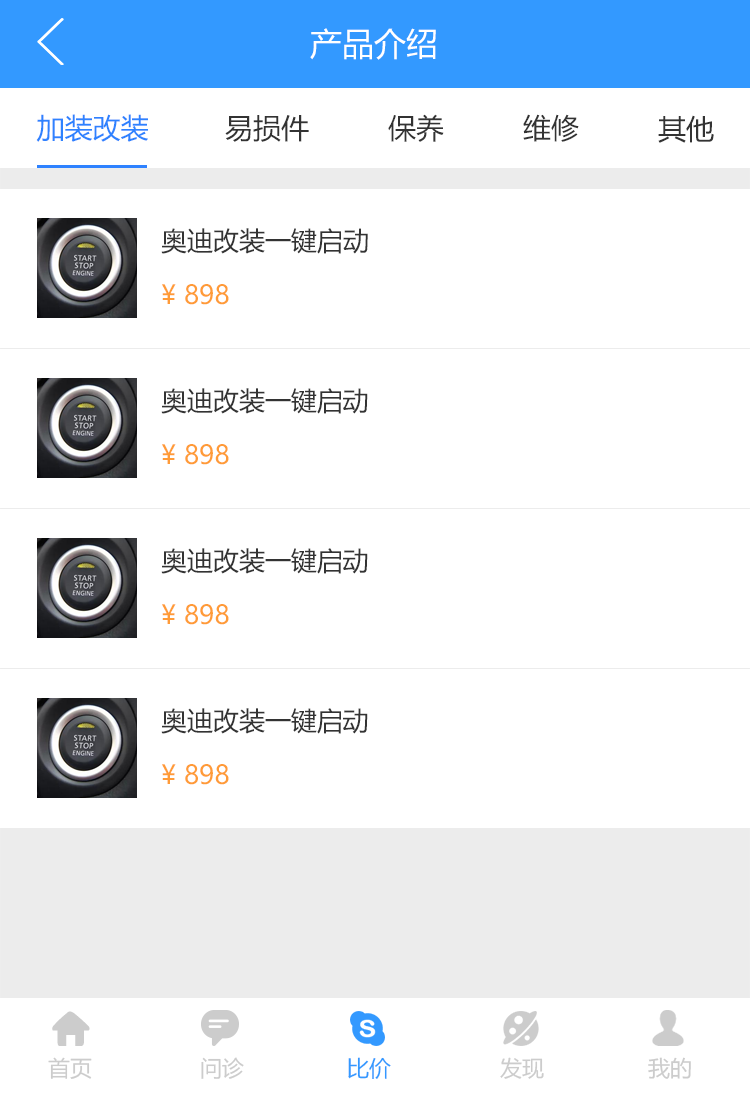
<style>
.page{position:relative;width:750px;height:1096px;background:#ffffff}
.page>*{position:absolute;margin:0}
.t1{font:32px "MicrosoftYaHei";color:#ffffff}
.t2{font:28px "MicrosoftYaHei";color:#2e82ff}
.t3{font:28px "MicrosoftYaHei";color:#333333}
.t4{font:26px "MicrosoftYaHei";color:#333333}
.t5{font:26px "MicrosoftYaHei";color:#ff9b37}
.t6{font:22px "MicrosoftYaHei";color:#cccccc}
.t7{font:22px "MicrosoftYaHei";color:#3399ff}
</style>
<div class="page">
<p class="t1" style="left:310px;top:28px;width:126px;height:32px">产品介绍</p>
<p class="t2" style="left:36px;top:114px;width:112px;height:28px">加装改装</p>
<p class="t3" style="left:225px;top:115px;width:84px;height:27px">易损件</p>
<p class="t3" style="left:388px;top:114px;width:56px;height:28px">保养</p>
<p class="t3" style="left:523px;top:114px;width:56px;height:28px">维修</p>
<p class="t3" style="left:658px;top:115px;width:56px;height:28px">其他</p>
<p class="t4" style="left:161px;top:228px;width:207px;height:26px">奥迪改装一键启动</p>
<p class="t5" style="left:162px;top:284px;width:67px;height:21px">¥ 898</p>
<p class="t4" style="left:161px;top:388px;width:207px;height:26px">奥迪改装一键启动</p>
<p class="t5" style="left:162px;top:444px;width:67px;height:21px">¥ 898</p>
<p class="t4" style="left:161px;top:548px;width:207px;height:26px">奥迪改装一键启动</p>
<p class="t5" style="left:162px;top:604px;width:67px;height:21px">¥ 898</p>
<p class="t4" style="left:161px;top:708px;width:207px;height:26px">奥迪改装一键启动</p>
<p class="t5" style="left:162px;top:764px;width:67px;height:21px">¥ 898</p>
<p class="t6" style="left:48px;top:1057px;width:44px;height:22px">首页</p>
<p class="t6" style="left:201px;top:1057px;width:43px;height:22px">问诊</p>
<p class="t7" style="left:348px;top:1057px;width:43px;height:22px">比价</p>
<p class="t6" style="left:500px;top:1057px;width:44px;height:22px">发现</p>
<p class="t6" style="left:648px;top:1057px;width:43px;height:22px">我的</p>
</div>
